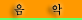
<style>
.page{position:relative;width:82px;height:20px;background:#ff9900}
.page>*{position:absolute;margin:0}
.t1{font:12px "BatangChe";color:#000000;scale:0.9 1}
</style>
<div class="page">
<p class="t1" style="left:14px;top:3px;width:49px;height:13px">음     악</p>
</div>
